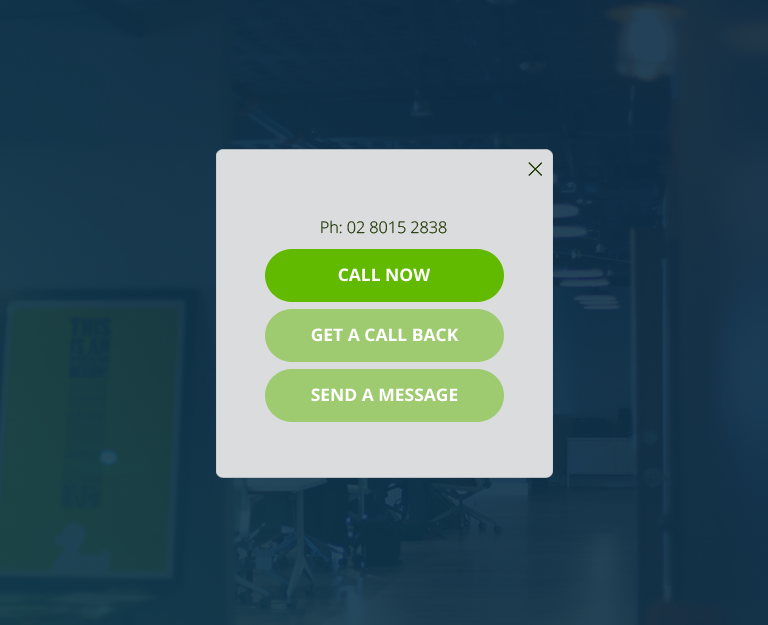
<style>
.page{position:relative;width:768px;height:625px}
.page>*{position:absolute;margin:0}
.t1{font:16px "OpenSans-Light";color:#223909}
.t2{font:17.3px "OpenSans-Bold";color:#ffffff;text-transform:uppercase}
</style>
<div class="page">
<p class="t1" style="left:321px;top:220px;width:126px;height:14px">Ph: 02 8015 2838</p>
<p class="t2" style="left:338px;top:268px;width:92px;height:14px">CALL NOW</p>
<p class="t2" style="left:311px;top:328px;width:148px;height:14px">get a call back</p>
<p class="t2" style="left:311px;top:388px;width:147px;height:14px">SEND A MESSAGE</p>
</div>
